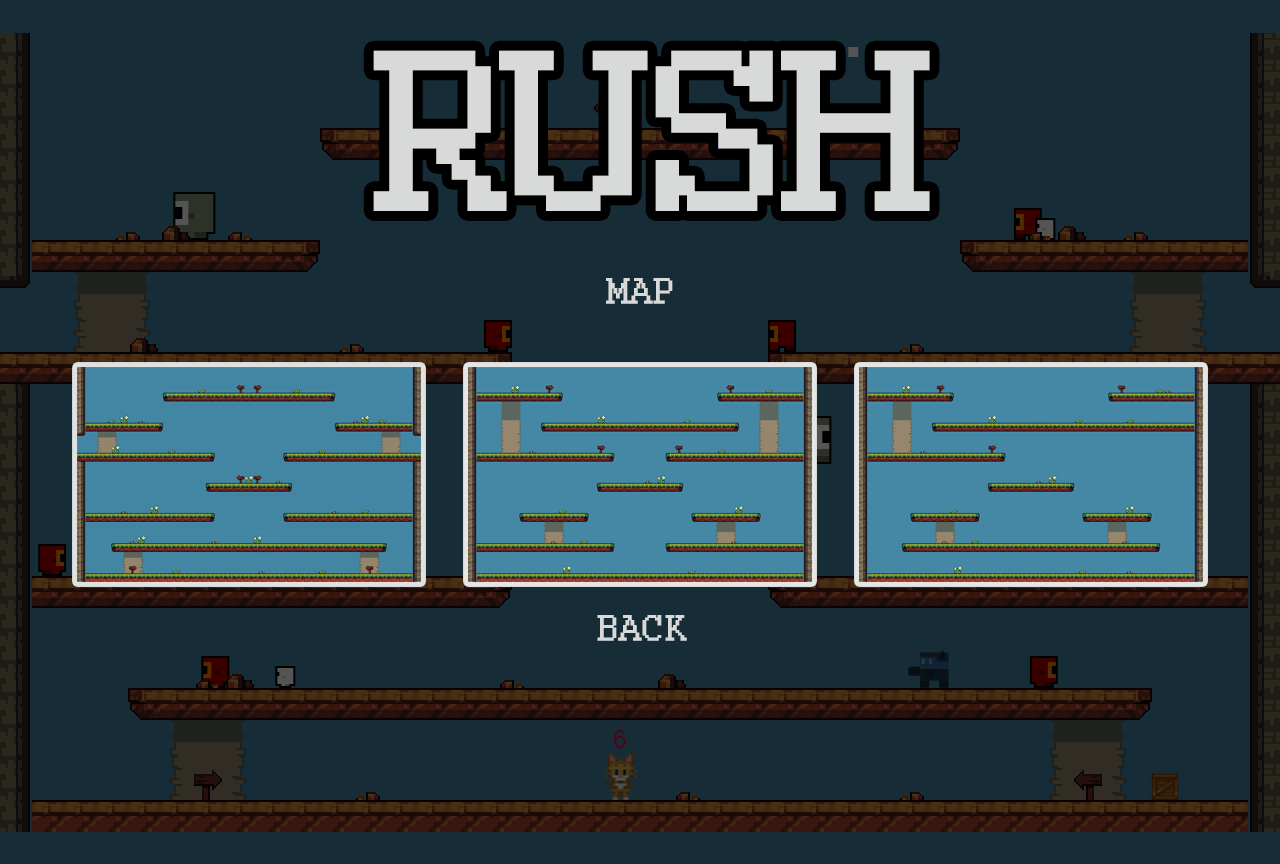
<style>
.page{position:relative;width:1280px;height:864px;background:#162d37}
.page>*{position:absolute;margin:0}
.t1{font:250px "Courier";color:#d8d9d9;font-weight:bold}
.t2{font:40px "Courier";color:#d8d9d9;text-transform:uppercase;font-weight:bold}
</style>
<div class="page">
<p class="t1" style="left:373px;top:50px;width:557px;height:161px">RUSH</p>
<p class="t2" style="left:606px;top:278px;width:67px;height:26px">MAP</p>
<p class="t2" style="left:597px;top:615px;width:90px;height:26px">Back</p>
</div>
